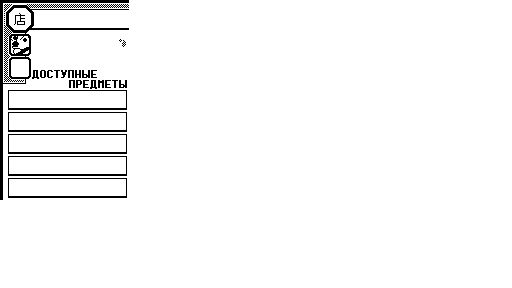
<style>
.page{position:relative;width:512px;height:288px;background:#ffffff}
.page>*{position:absolute;margin:0}
.t1{font:16px/10.7px "Silver";letter-spacing:0.036em;color:#000000;font-weight:bold;scale:1.16 1}
</style>
<div class="page">
<p class="t1" style="left:32px;top:70px;width:95px;height:19px">ДОСТУПНЫЕ<br>      ПРЕДМЕТЫ</p>
</div>
